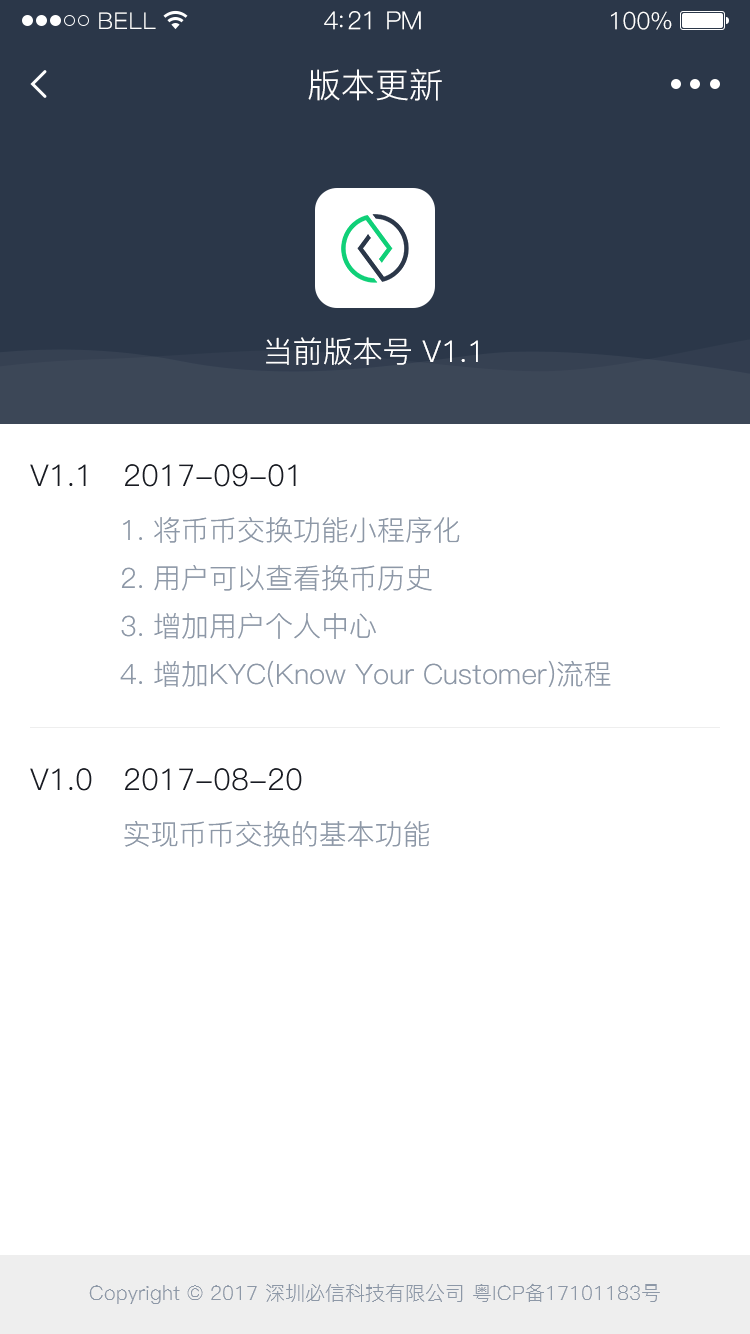
<style>
.page{position:relative;width:750px;height:1334px;background:#ffffff}
.page>*{position:absolute;margin:0}
.t1{font:23px "PingFang-SC-Regular";letter-spacing:0.02em;color:#ffffff}
.t2{font:25px "PingFang-SC-Regular";letter-spacing:-0.02em;color:#ffffff}
.t3{font:24px "PingFang-SC-Regular";letter-spacing:-0.02em;color:#ffffff}
.t4{font:34px "PingFang-SC-Regular";color:#ffffff}
.t5{font:30px "PingFang-SC-Regular";color:#ffffff}
.t6{font:28px/48px "PingFang-SC-Regular";color:#8d98a7}
.t7{font:30px/48px "PingFang-SC-Regular";color:#181b23}
.t8{font:30px/60px "PingFang-SC-Regular";color:#181b23}
.t9{font:30px/54px "PingFang-SC-Regular";color:#181b23}
.t10{font:28px/54px "PingFang-SC-Regular";color:#8d98a7}
.t11{font:20px "PingFang-SC-Regular";color:#8d98a7}
</style>
<div class="page">
<p class="t1" style="left:99px;top:12px;width:57px;height:17px">BELL</p>
<p class="t2" style="left:324px;top:11px;width:97px;height:19px">4:21 PM</p>
<p class="t3" style="left:611px;top:11px;width:61px;height:19px">100%</p>
<p class="t4" style="left:308px;top:68px;width:134px;height:33px">版本更新</p>
<p class="t5" style="left:266px;top:337px;width:212px;height:28px">当前版本号 V1.1</p>
<p class="t6" style="left:30px;top:464px;width:581px;height:223px"><span class="t7">V1.1   2017-09-</span><span class="t8">0</span><span class="t9">1<br>          </span><span class="t10">1</span>. 将币币交换功能小程序化<br>          2. 用户可以查看换币历史<br>          3. 增加用户个人中心<br>          4. 增加KYC(Know Your Customer)流程</p>
<p class="t7" style="left:30px;top:768px;width:399px;height:79px">V1.0   2017-08-2<span class="t9">0<br>          </span><span class="t6">实现币币交换的基本功能</span></p>
<p class="t11" style="left:89px;top:1283px;width:571px;height:21px">Copyright © 2017 深圳必信科技有限公司 粤ICP备17101183号</p>
</div>
